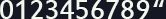
<style>
.page{position:relative;width:166px;height:19px;background:#151722}
.page>*{position:absolute;margin:0}
.t1{font:30px "EstrangeloEdessa";color:#f2f7f0}
</style>
<div class="page">
<p class="t1" style="left:0px;top:0px;width:150px;height:19px">0123456789</p>
<p class="t1" style="left:153px;top:0px;width:11px;height:7px">“</p>
</div>
